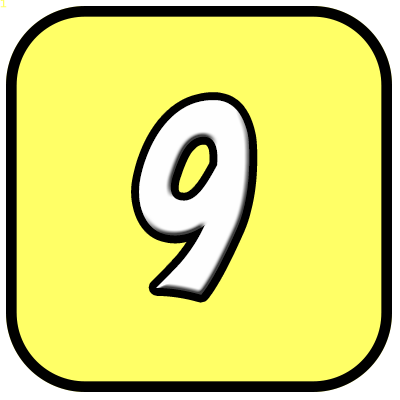
<style>
.page{position:relative;width:400px;height:400px;background:#ffff66}
.page>*{position:absolute;margin:0}
.t1{font:10.7px "LucidaConsole";color:#ffff66}
.t2{font:240px "Yikes";color:#fefefe}
</style>
<div class="page">
<p class="t1" style="left:0px;top:0px;width:7px;height:8px">1</p>
<p class="t2" style="left:139px;top:100px;width:111px;height:195px">9</p>
</div>
